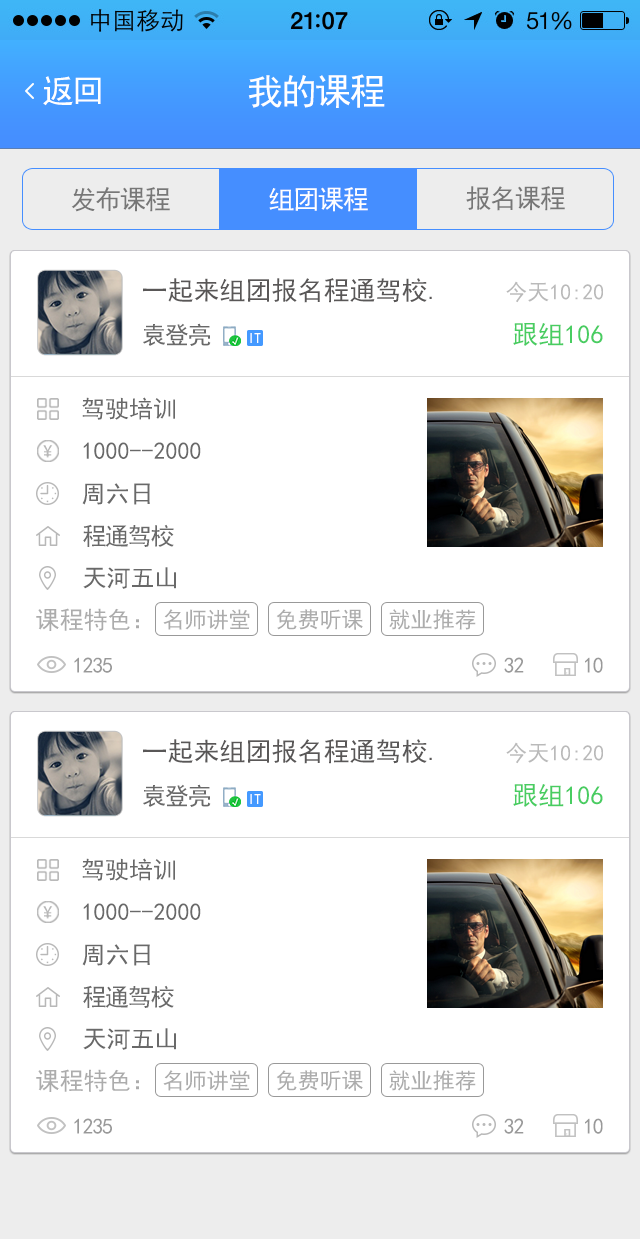
<style>
.page{position:relative;width:640px;height:1239px;background:#ffffff}
.page>*{position:absolute;margin:0}
.t1{font:32px "SimHei";letter-spacing:-0.05em;color:#ffffff}
.t2{font:36px "SimHei";letter-spacing:-0.05em;color:#ffffff}
.t3{font:26px "SimHei";letter-spacing:-0.05em;color:#777777}
.t4{font:26px "SimHei";letter-spacing:-0.05em;color:#ffffff}
.t5{font:26px "SimHei";color:#595757}
.t6{font:22px "SimHei";color:#bababa}
.t7{font:24px "SimHei";letter-spacing:-0.05em;color:#696969}
.t8{font:26px "SimHei";color:#48cd61}
.t9{font:14.8px "SimHei";letter-spacing:-0.05em;color:#ffffff}
.t10{font:24px "SimHei";color:#696969}
.t11{font:26px "SimHei";letter-spacing:-0.05em;color:#696969}
.t12{font:26px "SimHei";letter-spacing:-0.05em;color:#999999}
.t13{font:24px "SimHei";letter-spacing:-0.05em;color:#999999}
.t14{font:24px "SimHei";color:#acacac}
.t15{font:22px "SimHei";color:#acacac}
.t16{font:22px "SimHei";letter-spacing:-0.05em;color:#999999}
</style>
<div class="page">
<p class="t1" style="left:43px;top:76px;width:58px;height:30px">返回</p>
<p class="t2" style="left:248px;top:74px;width:137px;height:34px">我的课程</p>
<p class="t3" style="left:71px;top:187px;width:99px;height:25px">发布课程</p>
<p class="t4" style="left:269px;top:187px;width:99px;height:25px">组团课程</p>
<p class="t3" style="left:466px;top:186px;width:99px;height:25px">报名课程</p>
<p class="t5" style="left:143px;top:278px;width:289px;height:25px">一起来组团报名程通驾校.</p>
<p class="t6" style="left:506px;top:281px;width:97px;height:22px">今天10:20</p>
<p class="t7" style="left:143px;top:323px;width:68px;height:23px">袁登亮</p>
<p class="t8" style="left:513px;top:323px;width:90px;height:23px">跟组106</p>
<p class="t9" style="left:250px;top:333px;width:11px;height:10px">IT</p>
<p class="t10" style="left:82px;top:397px;width:93px;height:23px"><span class="t11">     </span>驾驶培训</p>
<p class="t10" style="left:83px;top:442px;width:118px;height:17px"><span class="t12">    </span>1000--2000</p>
<p class="t10" style="left:82px;top:483px;width:68px;height:22px"><span class="t13">     </span>周六日</p>
<p class="t7" style="left:83px;top:524px;width:91px;height:23px">程通驾校</p>
<p class="t10" style="left:83px;top:567px;width:93px;height:22px"><span class="t12">      </span>天河五山</p>
<p class="t14" style="left:36px;top:608px;width:103px;height:23px">课程特色：</p>
<p class="t15" style="left:163px;top:609px;width:87px;height:21px">名师讲堂</p>
<p class="t15" style="left:276px;top:609px;width:87px;height:21px">免费听课</p>
<p class="t15" style="left:389px;top:609px;width:87px;height:21px">就业推荐</p>
<p class="t16" style="left:74px;top:657px;width:38px;height:16px"><span class="t12">     </span>1235</p>
<p class="t16" style="left:504px;top:657px;width:20px;height:16px"><span class="t12">     </span>32</p>
<p class="t16" style="left:585px;top:657px;width:18px;height:16px"><span class="t12">    </span>10</p>
<p class="t5" style="left:143px;top:739px;width:289px;height:25px">一起来组团报名程通驾校.</p>
<p class="t6" style="left:506px;top:742px;width:97px;height:22px">今天10:20</p>
<p class="t7" style="left:143px;top:784px;width:68px;height:23px">袁登亮</p>
<p class="t8" style="left:513px;top:784px;width:90px;height:23px">跟组106</p>
<p class="t9" style="left:250px;top:794px;width:11px;height:10px">IT</p>
<p class="t10" style="left:82px;top:858px;width:93px;height:23px"><span class="t11">     </span>驾驶培训</p>
<p class="t10" style="left:83px;top:903px;width:118px;height:17px"><span class="t12">    </span>1000--2000</p>
<p class="t10" style="left:82px;top:944px;width:68px;height:22px"><span class="t13">     </span>周六日</p>
<p class="t7" style="left:83px;top:985px;width:91px;height:23px">程通驾校</p>
<p class="t10" style="left:83px;top:1028px;width:93px;height:22px"><span class="t12">      </span>天河五山</p>
<p class="t14" style="left:36px;top:1069px;width:103px;height:23px">课程特色：</p>
<p class="t15" style="left:163px;top:1070px;width:87px;height:21px">名师讲堂</p>
<p class="t15" style="left:276px;top:1070px;width:87px;height:21px">免费听课</p>
<p class="t15" style="left:389px;top:1070px;width:87px;height:21px">就业推荐</p>
<p class="t16" style="left:74px;top:1118px;width:38px;height:16px"><span class="t12">     </span>1235</p>
<p class="t16" style="left:504px;top:1118px;width:20px;height:16px"><span class="t12">     </span>32</p>
<p class="t16" style="left:585px;top:1118px;width:18px;height:16px"><span class="t12">    </span>10</p>
</div>
